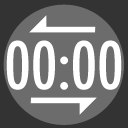
<style>
.page{position:relative;width:128px;height:128px;background:#6c6c6c}
.page>*{position:absolute;margin:0}
.t1{font:64px "Futura-CondensedMedium";color:#ffffff}
</style>
<div class="page">
<p class="t1" style="left:6px;top:40px;width:116px;height:50px">00:00</p>
</div>
